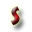
<style>
.page{position:relative;width:32px;height:32px;background:#ffffff}
.page>*{position:absolute;margin:0}
.t1{font:25px "BerlinSansFBDemi-Bold";letter-spacing:0.1em}
</style>
<div class="page">
<p class="t1" style="left:11px;top:6px;width:9px;height:19px">S</p>
</div>
